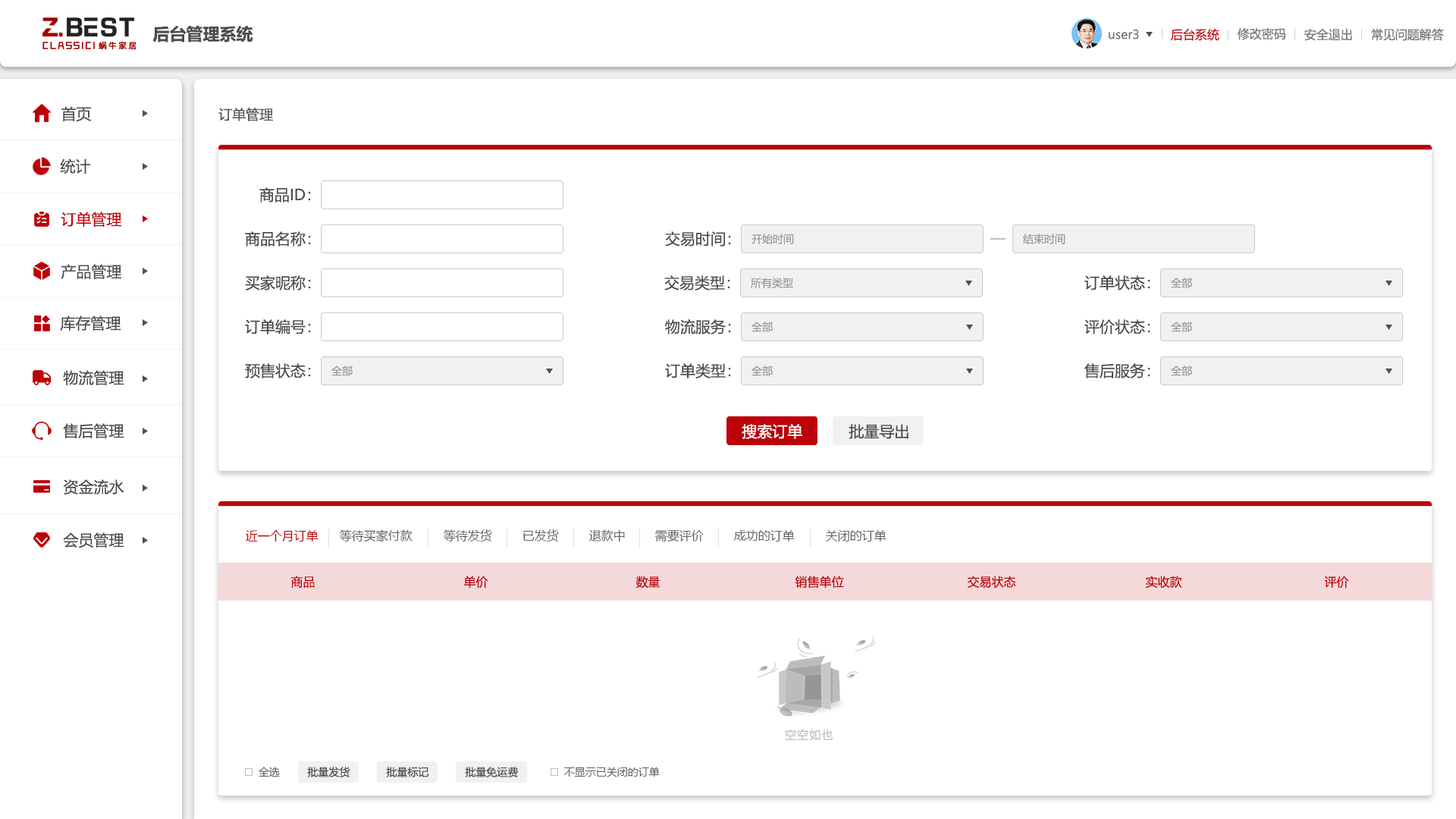
<style>
.page{position:relative;width:1456px;height:819px;background:#ffffff}
.page>*{position:absolute;margin:0}
.t1{font:16.7px "MicrosoftYaHei-Bold";color:#4b4b4b}
.t2{font:12.1px "MicrosoftYaHei";color:#777777}
.t3{font:12.1px "MicrosoftYaHei";color:#bc0108}
.t4{font:15.2px "MicrosoftYaHei";color:#505050}
.t5{font:13.6px "MicrosoftYaHei";color:#505050}
.t6{font:15.2px "MicrosoftYaHei";color:#4b4b4b}
.t7{font:15.2px "MicrosoftYaHei";color:#bc0108}
.t8{font:10.6px "MicrosoftYaHei";color:#999999}
.t9{font:15.2px "MicrosoftYaHei";color:#ffffff}
.t10{font:12.1px "MicrosoftYaHei";color:#636363}
.t11{font:12.1px "SourceHanSansCN-Regular";color:#c2c2c2}
.t12{font:10.6px "MicrosoftYaHei";color:#636363}
.t13{font:10.6px "MicrosoftYaHei";color:#4b4b4b}
</style>
<div class="page">
<p class="t1" style="left:152px;top:25px;width:101px;height:17px">后台管理系统</p>
<p class="t2" style="left:1109px;top:29px;width:30px;height:10px">user3</p>
<p class="t3" style="left:1170px;top:28px;width:49px;height:13px">后台系统</p>
<p class="t2" style="left:1238px;top:27px;width:48px;height:13px">修改密码</p>
<p class="t2" style="left:1304px;top:28px;width:48px;height:13px">安全退出</p>
<p class="t2" style="left:1371px;top:28px;width:73px;height:13px">常见问题解答</p>
<p class="t4" style="left:61px;top:106px;width:30px;height:16px">首页</p>
<p class="t5" style="left:218px;top:108px;width:55px;height:13px">订单管理</p>
<p class="t4" style="left:60px;top:158px;width:31px;height:16px">统计</p>
<p class="t6" style="left:259px;top:187px;width:52px;height:15px">商品ID：</p>
<p class="t7" style="left:61px;top:212px;width:61px;height:15px">订单管理</p>
<p class="t6" style="left:245px;top:231px;width:66px;height:15px">商品名称：</p>
<p class="t6" style="left:665px;top:231px;width:66px;height:15px">交易时间：</p>
<p class="t8" style="left:751px;top:234px;width:43px;height:10px">开始时间</p>
<p class="t8" style="left:1023px;top:234px;width:42px;height:10px">结束时间</p>
<p class="t6" style="left:61px;top:264px;width:61px;height:15px">产品管理</p>
<p class="t6" style="left:245px;top:275px;width:66px;height:15px">买家昵称：</p>
<p class="t6" style="left:664px;top:275px;width:66px;height:15px">交易类型：</p>
<p class="t8" style="left:751px;top:278px;width:42px;height:10px">所有类型</p>
<p class="t6" style="left:1084px;top:275px;width:66px;height:15px">订单状态：</p>
<p class="t8" style="left:1171px;top:278px;width:21px;height:10px">全部</p>
<p class="t6" style="left:60px;top:315px;width:61px;height:16px">库存管理</p>
<p class="t6" style="left:245px;top:319px;width:66px;height:15px">订单编号：</p>
<p class="t6" style="left:665px;top:319px;width:66px;height:15px">物流服务：</p>
<p class="t8" style="left:751px;top:322px;width:22px;height:10px">全部</p>
<p class="t6" style="left:1084px;top:319px;width:66px;height:15px">评价状态：</p>
<p class="t8" style="left:1171px;top:322px;width:21px;height:10px">全部</p>
<p class="t6" style="left:245px;top:363px;width:66px;height:15px">预售状态：</p>
<p class="t8" style="left:331px;top:366px;width:22px;height:10px">全部</p>
<p class="t6" style="left:665px;top:363px;width:66px;height:15px">订单类型：</p>
<p class="t8" style="left:751px;top:366px;width:22px;height:10px">全部</p>
<p class="t6" style="left:1084px;top:363px;width:66px;height:15px">售后服务：</p>
<p class="t8" style="left:1171px;top:366px;width:21px;height:10px">全部</p>
<p class="t6" style="left:63px;top:370px;width:61px;height:15px">物流管理</p>
<p class="t6" style="left:63px;top:423px;width:61px;height:15px">售后管理</p>
<p class="t9" style="left:742px;top:424px;width:60px;height:15px">搜索订单</p>
<p class="t6" style="left:849px;top:424px;width:59px;height:15px">批量导出</p>
<p class="t6" style="left:63px;top:479px;width:61px;height:16px">资金流水</p>
<p class="t6" style="left:63px;top:532px;width:61px;height:16px">会员管理</p>
<p class="t3" style="left:246px;top:530px;width:72px;height:11px">近一个月订单</p>
<p class="t10" style="left:340px;top:529px;width:73px;height:13px">等待买家付款</p>
<p class="t10" style="left:444px;top:529px;width:48px;height:13px">等待发货</p>
<p class="t10" style="left:522px;top:529px;width:37px;height:12px">已发货</p>
<p class="t10" style="left:589px;top:529px;width:36px;height:12px">退款中</p>
<p class="t10" style="left:655px;top:530px;width:49px;height:12px">需要评价</p>
<p class="t10" style="left:733px;top:530px;width:62px;height:11px">成功的订单</p>
<p class="t10" style="left:826px;top:530px;width:60px;height:11px">关闭的订单</p>
<p class="t3" style="left:290px;top:576px;width:25px;height:12px">商品</p>
<p class="t3" style="left:463px;top:576px;width:25px;height:12px">单价</p>
<p class="t3" style="left:635px;top:576px;width:25px;height:12px">数量</p>
<p class="t3" style="left:795px;top:576px;width:49px;height:12px">销售单位</p>
<p class="t3" style="left:967px;top:576px;width:49px;height:12px">交易状态</p>
<p class="t3" style="left:1145px;top:576px;width:37px;height:12px">实收款</p>
<p class="t3" style="left:1324px;top:576px;width:25px;height:12px">评价</p>
<p class="t11" style="left:785px;top:729px;width:48px;height:12px">空空如也</p>
<p class="t12" style="left:259px;top:767px;width:21px;height:10px">全选</p>
<p class="t13" style="left:307px;top:767px;width:43px;height:10px">批量发货</p>
<p class="t13" style="left:386px;top:767px;width:43px;height:10px">批量标记</p>
<p class="t13" style="left:465px;top:767px;width:53px;height:10px">批量免运费</p>
<p class="t12" style="left:563px;top:767px;width:97px;height:10px">不显示已关闭的订单</p>
</div>
